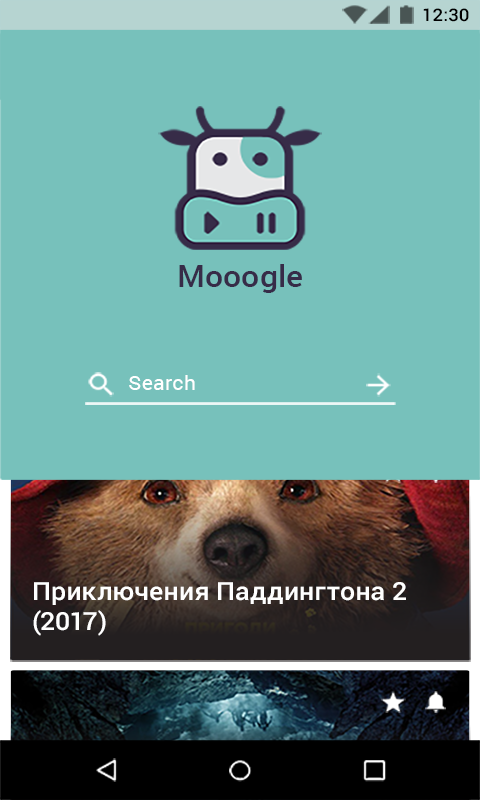
<style>
.page{position:relative;width:480px;height:800px;background:#77c1bb}
.page>*{position:absolute;margin:0}
.t1{font:17.5px "Roboto-Medium";color:#000000;scale:1.07 1}
.t2{font:30.2px "Roboto-Medium";letter-spacing:0.005em;color:#372c48;scale:1.07 1}
.t3{font:20px "Roboto-Regular";letter-spacing:0.01em;color:#ffffff;scale:1.07 1}
.t4{font:25px/30px "Roboto-Medium";color:#ffffff;scale:1.07 1}
</style>
<div class="page">
<p class="t1" style="left:423px;top:8px;width:46px;height:14px">12:30</p>
<p class="t2" style="left:179px;top:264px;width:123px;height:29px">Mooogle</p>
<p class="t3" style="left:129px;top:375px;width:66px;height:15px">Search</p>
<p class="t4" style="left:33px;top:582px;width:373px;height:54px">Приключения Паддингтона 2 (2017)</p>
</div>
